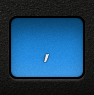
<style>
.page{position:relative;width:94px;height:95px}
.page>*{position:absolute;margin:0}
.t1{font:32px "MyriadPro-Regular";color:#ffffff}
</style>
<div class="page">
<p class="t1" style="left:44px;top:54px;width:5px;height:8px">,</p>
</div>
